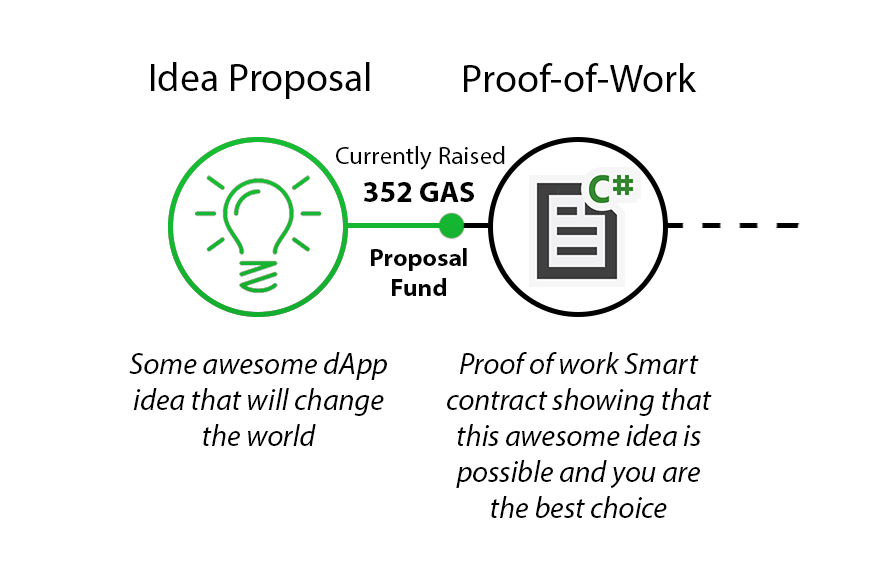
<style>
.page{position:relative;width:876px;height:580px;background:#ffffff}
.page>*{position:absolute;margin:0}
.t1{font:39.9px "MyriadPro-Regular";color:#000000}
.t2{font:25px "MyriadPro-Regular";color:#000000}
.t3{font:29.8px "MyriadPro-Bold";color:#000000}
.t4{font:25px "MyriadPro-Bold";color:#000000}
.t5{font:30px "MyriadPro-It";color:#000000}
</style>
<div class="page">
<p class="t1" style="left:151px;top:62px;width:219px;height:37px">Idea Proposal</p>
<p class="t1" style="left:464px;top:63px;width:233px;height:29px">Proof-of-Work</p>
<p class="t2" style="left:336px;top:146px;width:169px;height:24px">Currently Raised</p>
<p class="t3" style="left:364px;top:182px;width:110px;height:20px">352 GAS</p>
<p class="t4" style="left:371px;top:248px;width:96px;height:48px;text-align:center">Proposal Fund</p>
<p class="t5" style="left:129px;top:352px;width:258px;height:94px;text-align:center">Some awesome dApp idea that will change the world</p>
<p class="t5" style="left:447px;top:352px;width:265px;height:166px;text-align:center">Proof of work Smart contract showing that this awesome idea is possible and you are the best choice</p>
</div>
